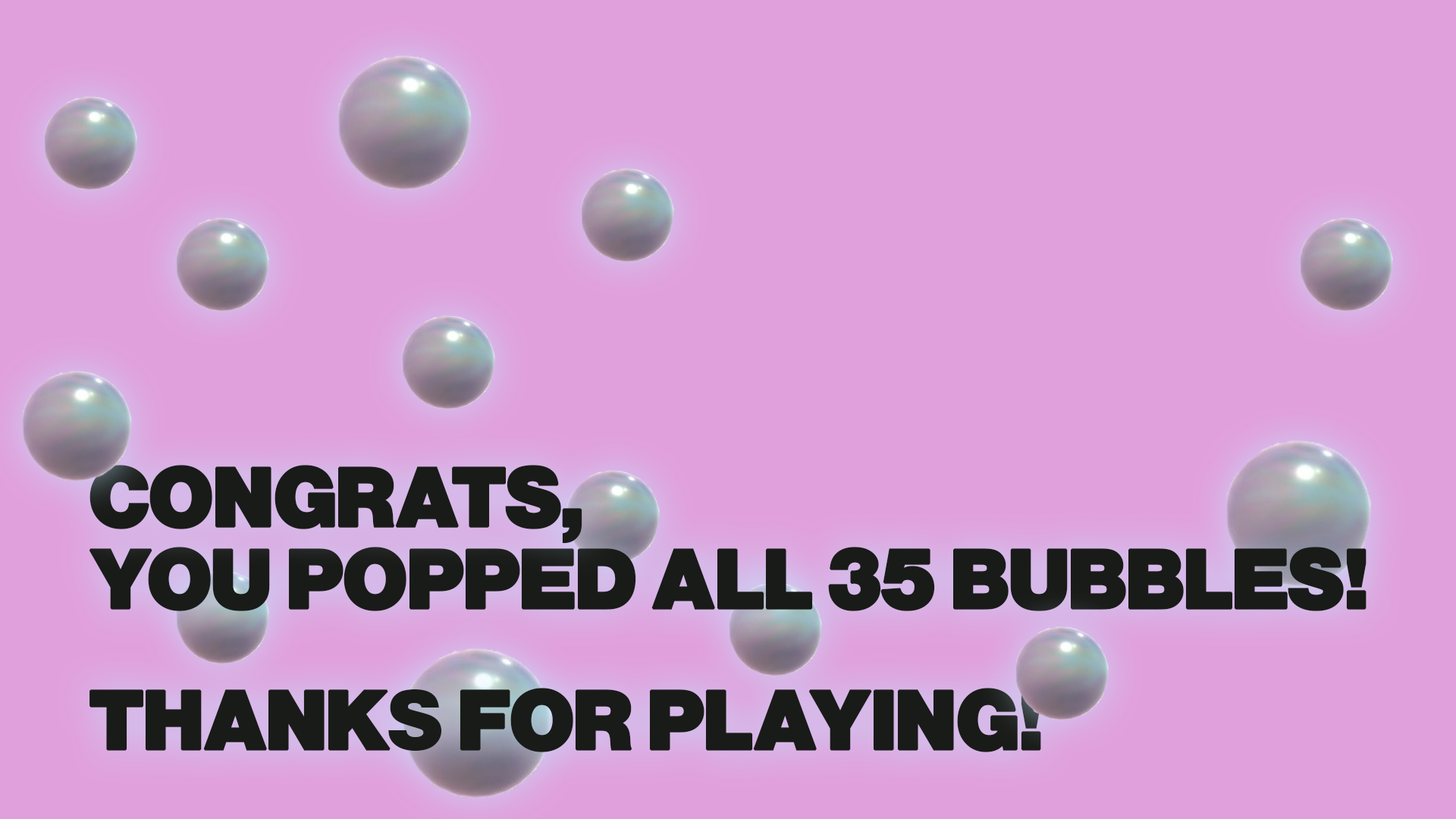
<style>
.page{position:relative;width:1456px;height:819px;background:#e0a0dc}
.page>*{position:absolute;margin:0}
.t1{font:87.9px "NimbusSansBeckerPBla";color:#191b18;font-weight:bold}
</style>
<div class="page">
<p class="t1" style="left:89px;top:465px;width:493px;height:79px">CONGRATS,</p>
<p class="t1" style="left:89px;top:547px;width:1277px;height:64px">YOU POPPED ALL 35 BUBBLES!</p>
<p class="t1" style="left:89px;top:688px;width:952px;height:64px">THANKS FOR PLAYING!</p>
</div>
